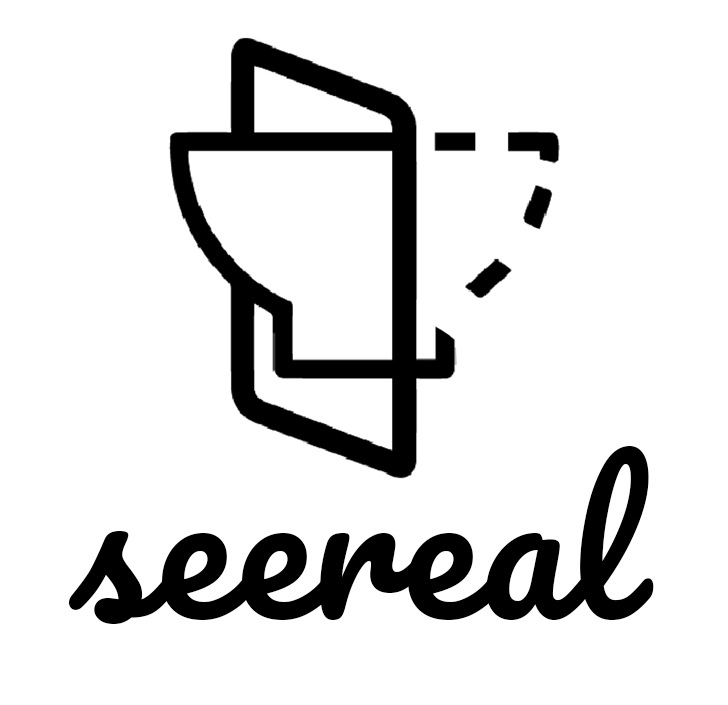
<style>
.page{position:relative;width:728px;height:705px;background:#ffffff}
.page>*{position:absolute;margin:0}
.t1{font:183.1px "Pacifico-Regular";letter-spacing:0.1em;color:#000000}
</style>
<div class="page">
<p class="t1" style="left:68px;top:446px;width:586px;height:178px">seereal</p>
</div>
